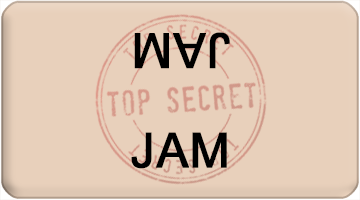
<style>
.page{position:relative;width:360px;height:200px;background:#e8d0bb}
.page>*{position:absolute;margin:0}
.t1{font:48px "ArialMT";color:#000000;font-weight:bold}
</style>
<div class="page">
<p class="t1" style="left:134px;top:32px;width:96px;height:37px;rotate:180deg">JAM</p>
<p class="t1" style="left:131px;top:132px;width:96px;height:37px">JAM</p>
</div>
